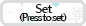
<style>
.page{position:relative;width:86px;height:26px;background:#ffffff}
.page>*{position:absolute;margin:0}
.t1{font:13.3px "AmiraParadiso";letter-spacing:-0.06em;color:#000000}
.t2{font:10.7px "AmiraParadiso";letter-spacing:-0.1em;color:#000000}
</style>
<div class="page">
<p class="t1" style="left:35px;top:4px;width:18px;height:9px;opacity:0.96">Set</p>
<p class="t2" style="left:19px;top:13px;width:48px;height:9px;opacity:0.96">(Press to set)</p>
</div>
